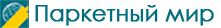
<style>
.page{position:relative;width:221px;height:28px;background:#ffffff}
.page>*{position:absolute;margin:0}
.t1{font:22px "CenturyGothic";color:#006d7e;font-weight:bold}
</style>
<div class="page">
<p class="t1" style="left:35px;top:5px;width:179px;height:21px">Паркетный мир</p>
</div>
